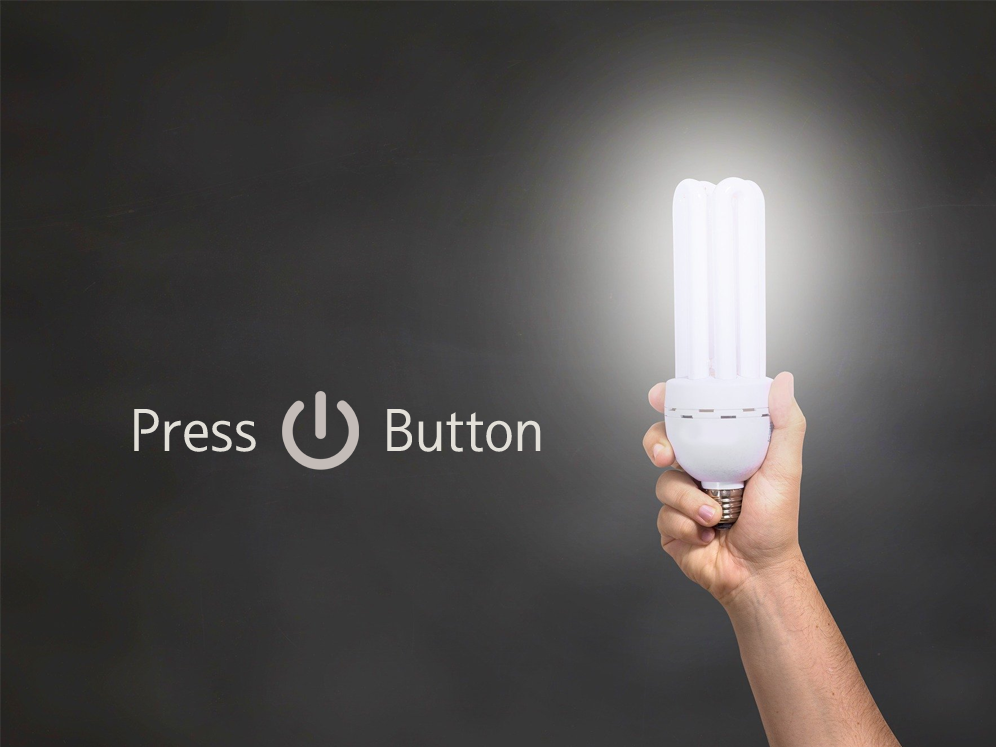
<style>
.page{position:relative;width:996px;height:747px}
.page>*{position:absolute;margin:0}
.t1{font:60px "SeN-CM";color:#e2dfd8}
</style>
<div class="page">
<p class="t1" style="left:134px;top:409px;width:407px;height:43px">Press       Button</p>
</div>
